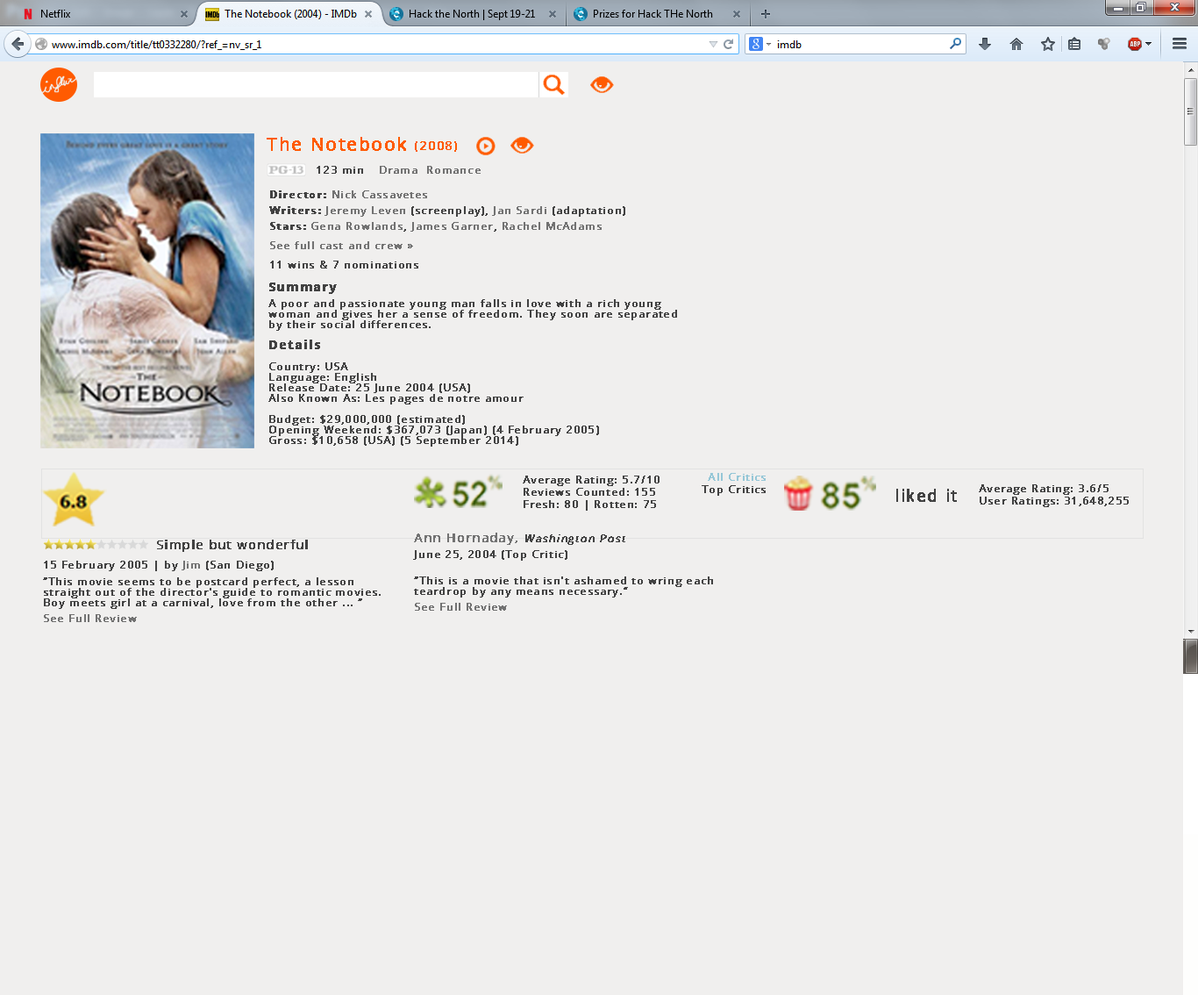
<style>
.page{position:relative;width:1198px;height:995px;background:#f0efee}
.page>*{position:absolute;margin:0}
.t1{font:17.5px "OpenSans";letter-spacing:0.095em;color:#ff5b01;font-weight:bold}
.t2{font:12.3px "OpenSans";letter-spacing:0.095em;color:#ff5b01;font-weight:bold}
.t3{font:10.5px "OpenSans";letter-spacing:0.095em;color:#424242;font-weight:bold}
.t4{font:10.5px "OpenSans";letter-spacing:0.095em;color:#727272;font-weight:bold}
.t5{font:10.5px/19.3px "OpenSans";letter-spacing:0.095em;color:#727272;font-weight:bold}
.t6{font:10.5px/15.8px "OpenSans-Bold";letter-spacing:0.095em;color:#424242;font-weight:bold}
.t7{font:10.5px/15.8px "OpenSans";letter-spacing:0.095em;color:#727272;font-weight:bold}
.t8{font:10.5px/15.8px "OpenSans";letter-spacing:0.095em;color:#424242;font-weight:bold}
.t9{font:10.5px/19.3px "OpenSans";letter-spacing:0.095em;color:#424242;font-weight:bold}
.t10{font:10.5px/10.5px "OpenSans";letter-spacing:0.095em;color:#424242;font-weight:bold}
.t11{font:12.3px/15.8px "OpenSans-Bold";letter-spacing:0.095em;color:#424242;font-weight:bold}
.t12{font:12.3px/10.5px "OpenSans-Bold";letter-spacing:0.095em;color:#424242;font-weight:bold}
.t13{font:10.5px/12.3px "OpenSans";letter-spacing:0.095em;color:#96c7d7;font-weight:bold}
.t14{font:10.5px/12.3px "OpenSans";letter-spacing:0.095em;color:#424242;font-weight:bold}
.t15{font:15.8px "OpenSans";letter-spacing:0.095em;color:#424242;font-weight:bold}
.t16{font:12.3px/15.8px "OpenSans";letter-spacing:0.095em;color:#727272;font-weight:bold}
.t17{font:10.5px/15.8px "OpenSans";letter-spacing:0.095em;color:#424242;font-weight:bold;font-style:italic}
.t18{font:12.3px/19.3px "OpenSans";letter-spacing:0.095em;color:#424242;font-weight:bold}
</style>
<div class="page">
<p class="t1" style="left:267px;top:137px;width:190px;height:15px">The Notebook <span class="t2">(2008)</span></p>
<p class="t3" style="left:317px;top:166px;width:46px;height:8px">123 min</p>
<p class="t4" style="left:380px;top:166px;width:101px;height:8px">Drama  Romance</p>
<p class="t5" style="left:269px;top:190px;width:357px;height:78px"><span class="t6">Director: </span><span class="t7">Nick Cassavetes<br></span><span class="t6">Writers: </span><span class="t7">Jeremy Leven</span><span class="t8"> (screenplay), </span><span class="t7">Jan Sardi </span><span class="t8">(adaptation)<br></span><span class="t6">Stars: </span><span class="t7">Gena Rowlands</span><span class="t8">, </span><span class="t7">James Garner</span><span class="t8">, </span><span class="t7">Rachel McAdams<br></span>See full cast and crew » <br><span class="t9">11 wins &amp; 7 nominations</span></p>
<p class="t10" style="left:268px;top:283px;width:409px;height:164px"><span class="t11">Summary</span><span class="t8"><br>A poo</span>r and passionate young man falls in love with a rich young woman and gives her a sense of freedom. They soon are separated by their social differences.<br><br><span class="t12">Details<br></span><br>Country: USA<br>Language: English<br>Release Date: 25 June 2004 (USA) <br>Also Known As: Les pages de notre amour <br><br>Budget: $29,000,000 (estimated)<br>Opening Weekend: $367,073 (Japan) (4 February 2005)<br>Gross: $10,658 (USA) (5 September 2014)</p>
<p class="t13" style="left:702px;top:473px;width:64px;height:23px;text-align:right">All Critics<br><span class="t14">Top Critics</span></p>
<p class="t14" style="left:523px;top:476px;width:137px;height:35px">Average Rating: 5.7/10<br>Reviews Counted: 155<br>Fresh: 80 | Rotten: 75</p>
<p class="t14" style="left:979px;top:484px;width:150px;height:23px">Average Rating: 3.6/5<br>User Ratings: 31,648,255</p>
<p class="t15" style="left:897px;top:489px;width:60px;height:13px">liked it</p>
<p class="t8" style="left:413px;top:533px;width:213px;height:28px"><span class="t10"><br></span><span class="t16">Ann Hornaday, </span><span class="t17">Washington Post<br></span>June 25, 2004 (Top Critic)</p>
<p class="t9" style="left:44px;top:540px;width:264px;height:31px"><span class="t18">       Simple but wonderful<br></span>15 February 2005 | by <span class="t5">Jim</span> (San Diego)</p>
<p class="t10" style="left:43px;top:577px;width:338px;height:45px">“This movie seems to be postcard perfect, a lesson straight out of the director's guide to romantic movies. Boy meets girl at a carnival, love from the other ... “<br><span class="t7">See Full Review</span></p>
<p class="t10" style="left:414px;top:576px;width:299px;height:35px">“This is a movie that isn't ashamed to wring each teardrop by any means necessary.”<br><span class="t7">See Full Review</span></p>
</div>
